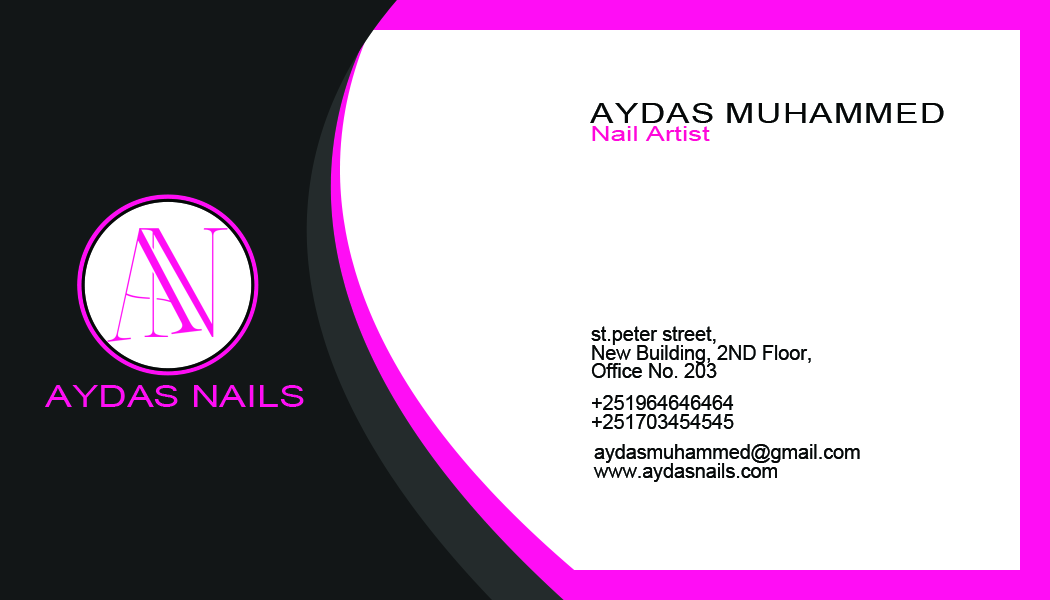
<style>
.page{position:relative;width:1050px;height:600px;background:#ffffff}
.page>*{position:absolute;margin:0}
.t1{font:26.8px "ArialMT";color:#060808;text-transform:uppercase;scale:1.31 1}
.t2{font:21.4px "ArialMT";color:#ff07db;scale:1.31 1}
.t3{font:20.9px/18.8px "ArialMT";color:#060808;scale:0.94 1}
.t4{font:30.2px "ArialMT";color:#ff0df5;scale:1.31 1}
</style>
<div class="page">
<p class="t1" style="left:590px;top:103px;width:354px;height:20px">Aydas Muhammed</p>
<p class="t2" style="left:592px;top:126px;width:118px;height:15px">Nail Artist</p>
<p class="t3" style="left:591px;top:326px;width:220px;height:52px">st.peter street, <br>New Building, 2ND Floor, <br>Office No. 203</p>
<p class="t4" style="left:45px;top:385px;width:259px;height:22px">AYDAS NAILS</p>
<p class="t3" style="left:592px;top:395px;width:142px;height:34px">+251964646464<br>+251703454545</p>
<p class="t3" style="left:593px;top:444px;width:267px;height:38px">aydasmuhammed@gmail.com<br>www.aydasnails.com</p>
</div>
